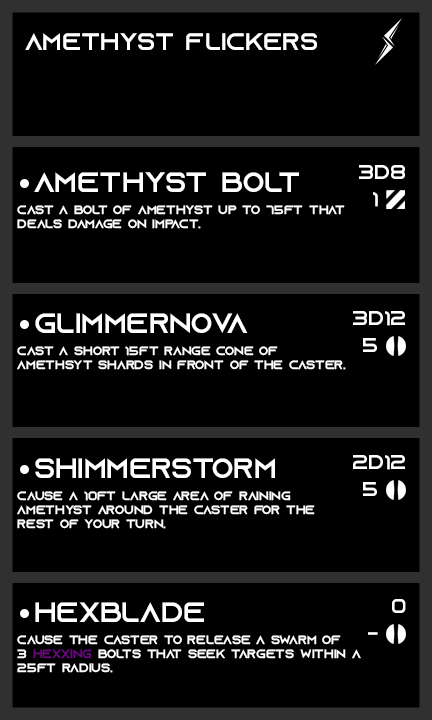
<style>
.page{position:relative;width:432px;height:720px;background:#000000}
.page>*{position:absolute;margin:0}
.t1{font:24px "AzonixRegular";color:#ffffff}
.t2{font:28px "AzonixRegular";color:#ffffff}
.t3{font:20px "AzonixRegular";color:#ffffff}
.t4{font:12px "AzonixRegular";color:#ffffff}
.t5{font:12px "AzonixRegular";color:#67087b}
</style>
<div class="page">
<p class="t1" style="left:25px;top:33px;width:292px;height:17px">amethyst flickers</p>
<p class="t2" style="left:34px;top:172px;width:265px;height:20px">amethyst bolt</p>
<p class="t3" style="left:359px;top:165px;width:46px;height:14px">3d8</p>
<p class="t3" style="left:373px;top:192px;width:5px;height:15px">1</p>
<p class="t4" style="left:17px;top:205px;width:328px;height:24px">cast a bolt of amethyst up to 75ft that<br>deals damage on impact.</p>
<p class="t2" style="left:35px;top:313px;width:213px;height:20px">glimmernova</p>
<p class="t3" style="left:353px;top:311px;width:52px;height:15px">3d12</p>
<p class="t3" style="left:363px;top:338px;width:14px;height:14px">5</p>
<p class="t4" style="left:17px;top:346px;width:329px;height:24px">cast a short 15ft range cone of <br>amethsyt shards in front of the caster.</p>
<p class="t2" style="left:35px;top:458px;width:240px;height:20px">shimmerstorm</p>
<p class="t3" style="left:353px;top:455px;width:52px;height:15px">2d12</p>
<p class="t3" style="left:363px;top:482px;width:14px;height:14px">5</p>
<p class="t4" style="left:17px;top:491px;width:298px;height:38px">cause a 10ft large area of raining <br>amethyst around the caster for the <br>rest of your turn.</p>
<p class="t2" style="left:35px;top:602px;width:169px;height:20px">hexblade</p>
<p class="t3" style="left:392px;top:599px;width:14px;height:14px">0</p>
<p class="t4" style="left:17px;top:635px;width:344px;height:38px">cause the caster to release a swarm of<br>3 <span class="t5">hexxing</span> bolts that seek targets within a <br>25ft radius.</p>
<p class="t3" style="left:368px;top:632px;width:10px;height:3px">-</p>
</div>
